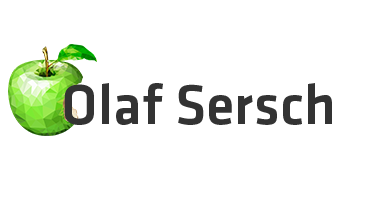
<style>
.page{position:relative;width:370px;height:200px;background:#ffffff}
.page>*{position:absolute;margin:0}
.t1{font:58.3px "Klavika-Medium";color:#333333}
</style>
<div class="page">
<p class="t1" style="left:64px;top:83px;width:268px;height:42px">Olaf Sersch</p>
</div>
